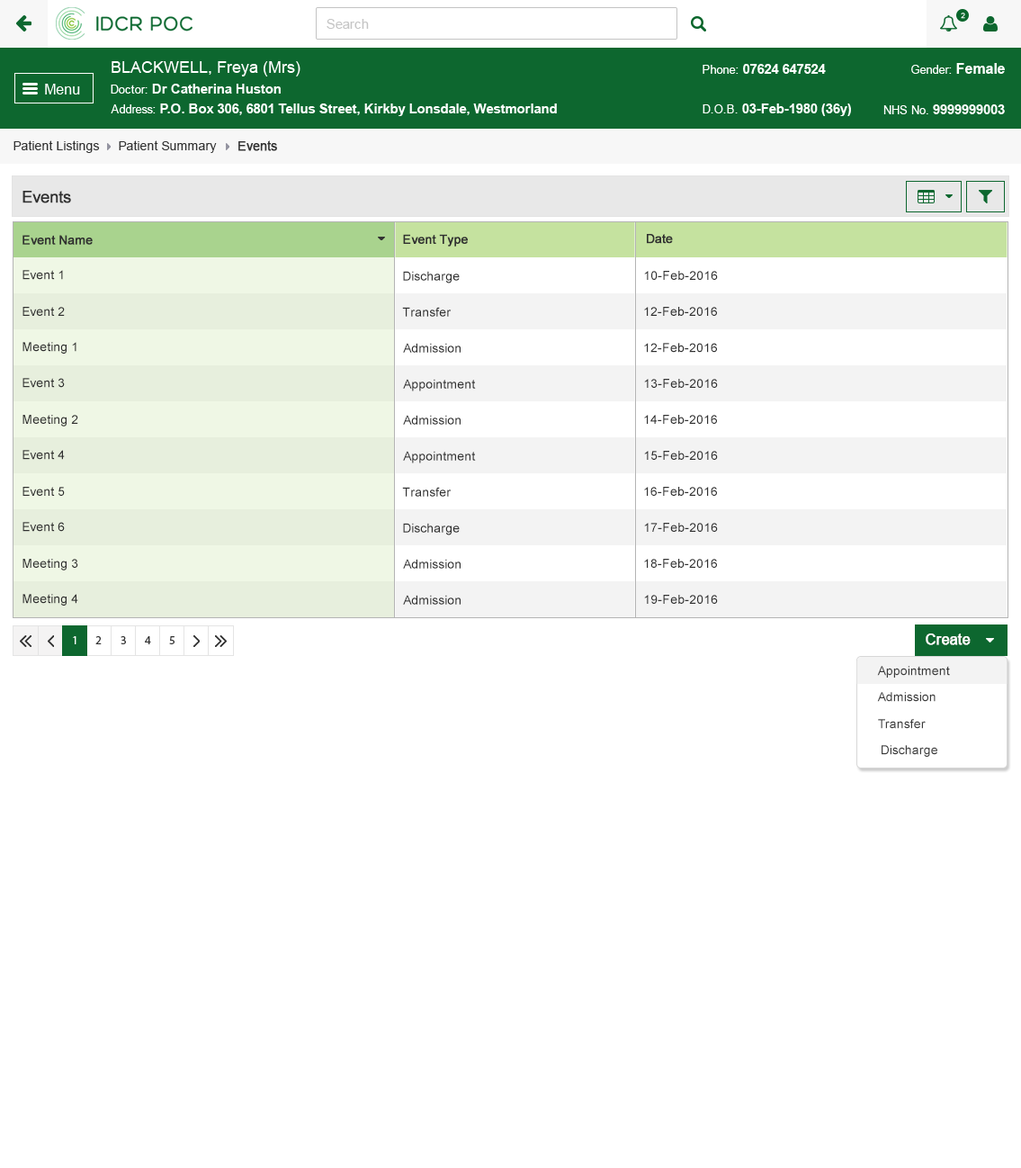
<style>
.page{position:relative;width:1021px;height:1168px;background:#ffffff}
.page>*{position:absolute;margin:0}
.t1{font:12.6px "ArialMT";color:#313131}
.t2{font:12.6px "ArialMT";color:#313131;font-weight:bold}
.t3{font:16.2px "ArialMT";color:#303030;font-weight:bold}
.t4{font:12.6px "ArialMT";color:#303030;font-weight:bold}
.t5{font:12.6px "ArialMT";color:#303030}
.t6{font:14.4px "ArialMT";color:#ffffff;font-weight:bold}
.t7{font:12.6px "ArialMT";color:#3c3c3c}
</style>
<div class="page">
<p class="t1" style="left:13px;top:140px;width:87px;height:13px">Patient Listings</p>
<p class="t1" style="left:119px;top:140px;width:98px;height:13px">Patient Summary</p>
<p class="t2" style="left:238px;top:140px;width:39px;height:11px">Events</p>
<p class="t3" style="left:22px;top:191px;width:49px;height:12px">Events</p>
<p class="t4" style="left:403px;top:234px;width:65px;height:13px">Event Type</p>
<p class="t4" style="left:647px;top:234px;width:26px;height:10px">Date</p>
<p class="t4" style="left:22px;top:235px;width:71px;height:10px">Event Name</p>
<p class="t5" style="left:22px;top:270px;width:41px;height:10px">Event 1</p>
<p class="t5" style="left:403px;top:271px;width:57px;height:12px">Discharge</p>
<p class="t5" style="left:644px;top:271px;width:74px;height:9px">10-Feb-2016</p>
<p class="t5" style="left:22px;top:307px;width:43px;height:9px">Event 2</p>
<p class="t5" style="left:402px;top:307px;width:50px;height:10px">Transfer</p>
<p class="t5" style="left:644px;top:307px;width:73px;height:9px">12-Feb-2016</p>
<p class="t5" style="left:22px;top:342px;width:54px;height:12px">Meeting 1</p>
<p class="t5" style="left:403px;top:343px;width:58px;height:10px">Admission</p>
<p class="t5" style="left:644px;top:343px;width:73px;height:10px">12-Feb-2016</p>
<p class="t5" style="left:22px;top:378px;width:43px;height:10px">Event 3</p>
<p class="t5" style="left:403px;top:379px;width:73px;height:12px">Appointment</p>
<p class="t5" style="left:644px;top:379px;width:74px;height:9px">13-Feb-2016</p>
<p class="t5" style="left:22px;top:415px;width:56px;height:11px">Meeting 2</p>
<p class="t5" style="left:403px;top:415px;width:58px;height:10px">Admission</p>
<p class="t5" style="left:644px;top:415px;width:73px;height:9px">14-Feb-2016</p>
<p class="t5" style="left:22px;top:450px;width:43px;height:10px">Event 4</p>
<p class="t5" style="left:403px;top:451px;width:73px;height:12px">Appointment</p>
<p class="t5" style="left:644px;top:451px;width:74px;height:9px">15-Feb-2016</p>
<p class="t5" style="left:22px;top:487px;width:43px;height:9px">Event 5</p>
<p class="t5" style="left:402px;top:487px;width:50px;height:10px">Transfer</p>
<p class="t5" style="left:644px;top:487px;width:73px;height:9px">16-Feb-2016</p>
<p class="t5" style="left:22px;top:522px;width:43px;height:10px">Event 6</p>
<p class="t5" style="left:403px;top:523px;width:57px;height:12px">Discharge</p>
<p class="t5" style="left:644px;top:523px;width:74px;height:9px">17-Feb-2016</p>
<p class="t5" style="left:22px;top:559px;width:56px;height:11px">Meeting 3</p>
<p class="t5" style="left:403px;top:559px;width:58px;height:10px">Admission</p>
<p class="t5" style="left:644px;top:559px;width:73px;height:9px">18-Feb-2016</p>
<p class="t5" style="left:22px;top:594px;width:56px;height:11px">Meeting 4</p>
<p class="t5" style="left:403px;top:595px;width:58px;height:10px">Admission</p>
<p class="t5" style="left:644px;top:595px;width:74px;height:9px">19-Feb-2016</p>
<p class="t6" style="left:926px;top:633px;width:45px;height:12px">Create</p>
<p class="t7" style="left:877px;top:666px;width:73px;height:11px">Appointment</p>
<p class="t7" style="left:877px;top:692px;width:59px;height:10px">Admission</p>
<p class="t7" style="left:878px;top:719px;width:48px;height:10px">Transfer</p>
<p class="t7" style="left:882px;top:745px;width:55px;height:12px">Discharge</p>
</div>
